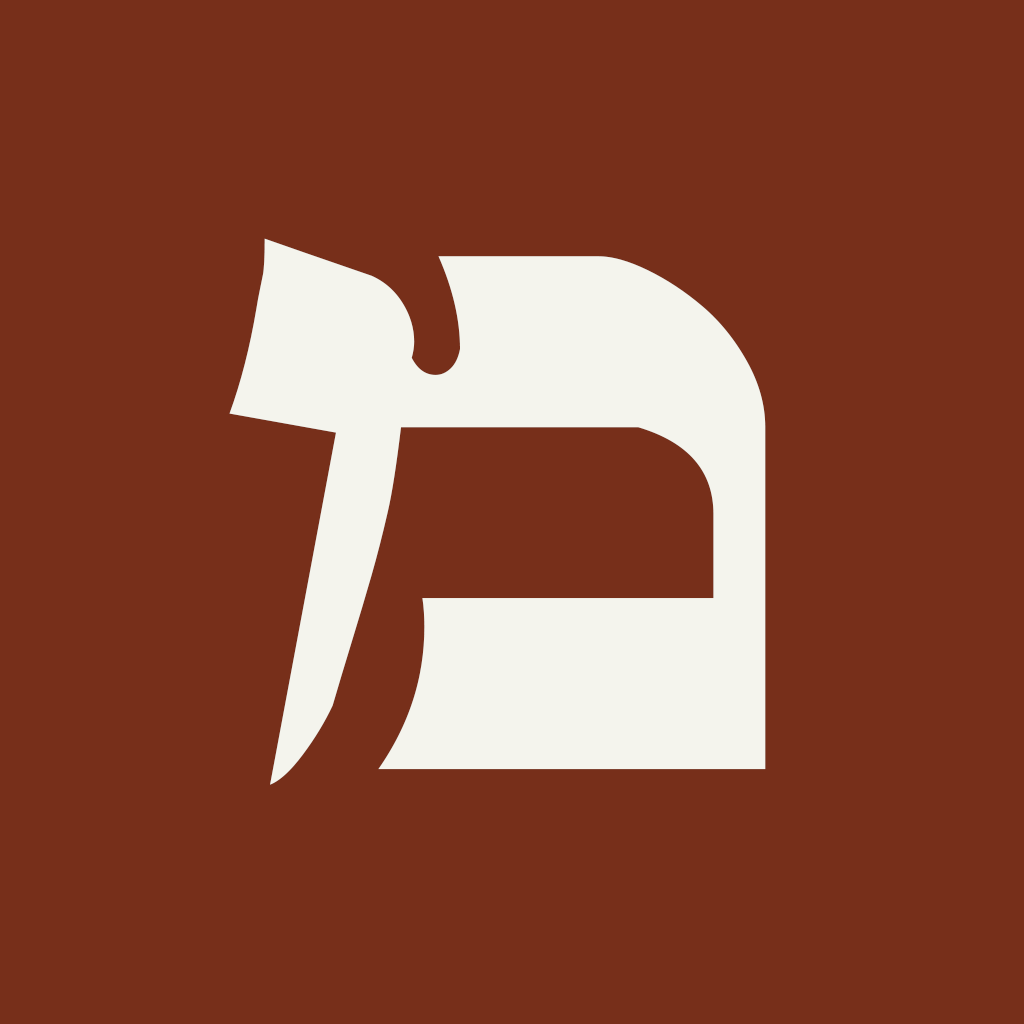
<style>
.page{position:relative;width:1024px;height:1024px;background:#772f1a}
.page>*{position:absolute;margin:0}
.t1{font:1000px "StamAshkenazCLM";color:#f4f4ed}
</style>
<div class="page">
<p class="t1" style="left:229px;top:238px;width:537px;height:547px">מ</p>
</div>
